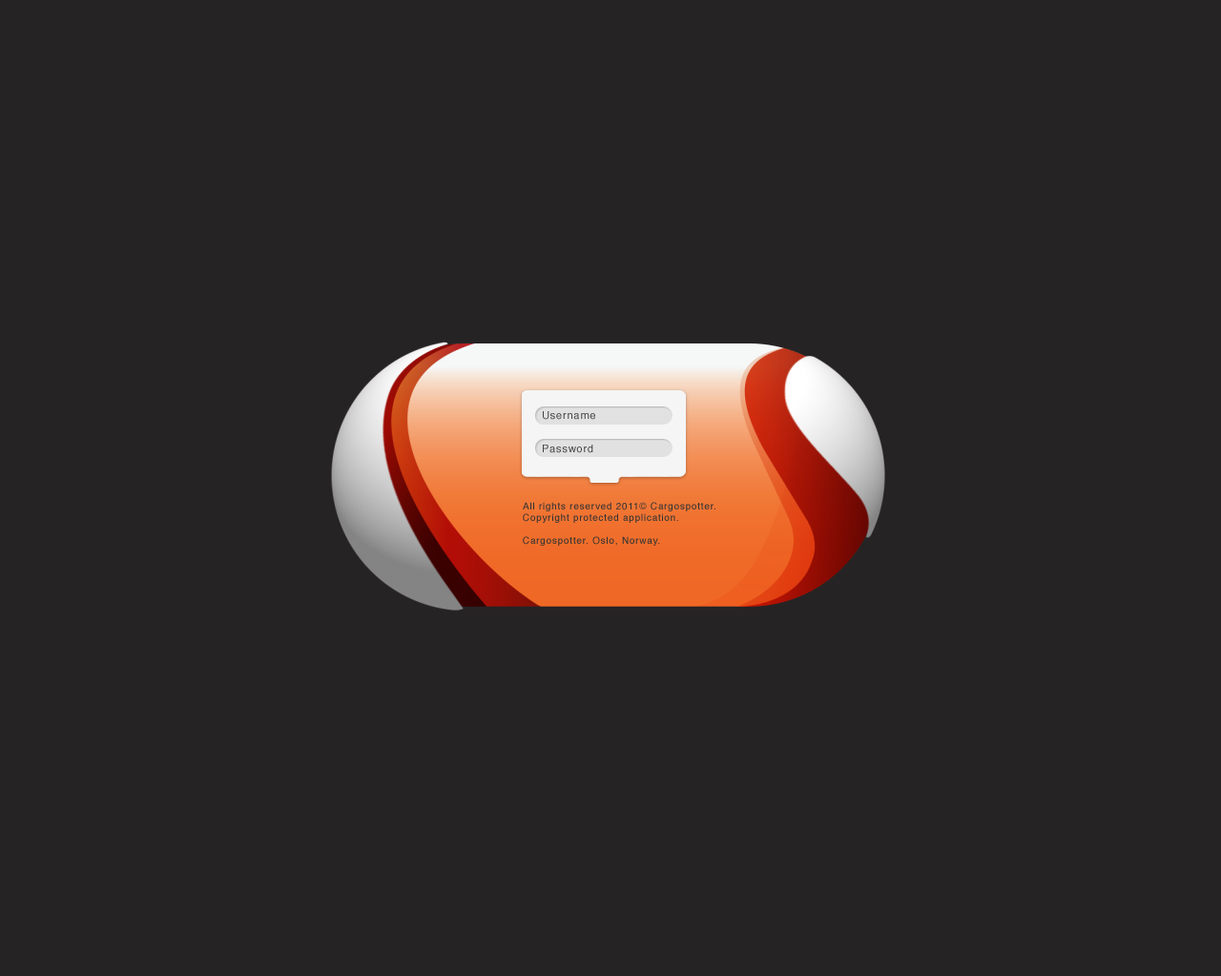
<style>
.page{position:relative;width:1221px;height:976px;background:#262324}
.page>*{position:absolute;margin:0}
.t1{font:10.5px "Helvetica";letter-spacing:0.075em;color:#414243}
.t2{font:9.5px "Helvetica";letter-spacing:0.075em;color:#333333}
</style>
<div class="page">
<p class="t1" style="left:543px;top:411px;width:52px;height:9px">Username</p>
<p class="t1" style="left:543px;top:445px;width:51px;height:8px">Password</p>
<p class="t2" style="left:523px;top:502px;width:193px;height:44px">All rights reserved 2011© Cargospotter.<br>Copyright protected application.<br><br>Cargospotter. Oslo, Norway.</p>
</div>
